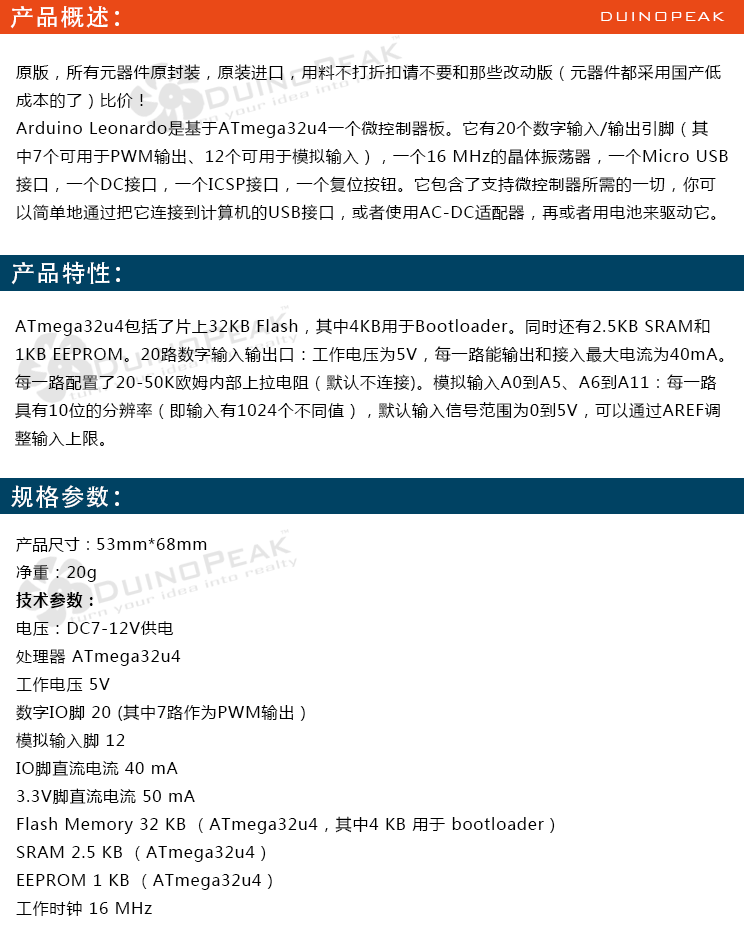
<style>
.page{position:relative;width:744px;height:929px;background:#ffffff}
.page>*{position:absolute;margin:0}
.t1{font:24px "AdobeHeitiStd-Regular";letter-spacing:0.05em;color:#ffffff}
.t2{font:18px "BankGothicBT-Light";letter-spacing:0.05em;color:#ffffff}
.t3{font:16px "MicrosoftYaHei";letter-spacing:0.05em;color:#000000}
.t4{font:16px "MicrosoftYaHei";color:#000000}
.t5{font:16px "MicrosoftYaHei-Bold";letter-spacing:0.05em;color:#000000}
</style>
<div class="page">
<p class="t1" style="left:10px;top:6px;width:109px;height:23px">产品概述：</p>
<p class="t2" style="left:601px;top:12px;width:124px;height:9px">DUINOPEAK</p>
<p class="t3" style="left:16px;top:64px;width:712px;height:157px">原版，所有元器件原封装，原装进口，用料不打折扣请不要和那些改动版（元器件都采用国产低<br>成本的了）比价！<br>Arduino Leonardo是基于ATmega32u4一个微控制器板。它有20个数字输入/输出引脚（其<br>中7个可用于PWM输出、12个可用于模拟输入），一个16 MHz的晶体振荡器，一个Micro USB<br>接口，一个DC接口，一个ICSP接口，一个复位按钮。它包含了支持微控制器所需的一切，你可<br>以简单地通过把它连接到计算机的USB接口，或者使用AC-DC适配器，再或者用电池来驱动它。</p>
<p class="t1" style="left:11px;top:261px;width:109px;height:24px">产品特性：</p>
<p class="t3" style="left:15px;top:318px;width:709px;height:128px">ATmega32u4包括了片上32KB Flash，其中4KB用于Bootloader。同时还有2.5KB SRAM和<br>1KB EEPROM。20路数字输入输出口：工作电压为5V，每一路能输出和接入最大电流为40mA。<br>每一路配置了20-50K欧姆内部上拉电阻（默认不连接)。模拟输入A0到A5、A6到A11：每一路<br>具有10位的分辨率（即输入有1024个不同值），默认输入信号范围为0到5V，可以通过AREF调<br>整输入上限。</p>
<p class="t1" style="left:11px;top:485px;width:108px;height:23px">规格参数：</p>
<p class="t3" style="left:16px;top:537px;width:539px;height:379px"><span class="t4">产品尺寸：</span>53mm*68mm<br>净重：20g<br><span class="t5">技术参数：<br></span>电压：DC7-12V供电<br>处理器 ATmega32u4<br>工作电压 5V<br>数字IO脚 20 (其中7路作为PWM输出）<br>模拟输入脚 12<br>IO脚直流电流 40 mA<br>3.3V脚直流电流 50 mA<br>Flash Memory 32 KB （ATmega32u4，其中4 KB 用于 bootloader）<br>SRAM 2.5 KB （ATmega32u4）<br>EEPROM 1 KB （ATmega32u4）<br>工作时钟 16 MHz</p>
</div>
